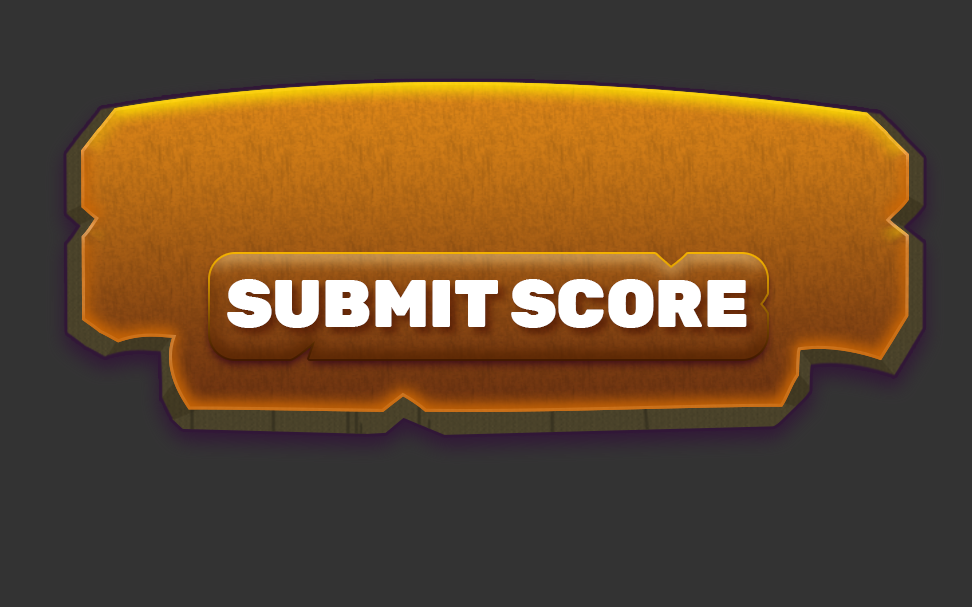
<style>
.page{position:relative;width:972px;height:607px;background:#333333}
.page>*{position:absolute;margin:0}
.t1{font:67px "Rubik-Black";color:#ffffff}
</style>
<div class="page">
<p class="t1" style="left:227px;top:279px;width:520px;height:49px">SUBMIT SCORE</p>
</div>
